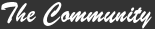
<style>
.page{position:relative;width:155px;height:29px;background:#333333}
.page>*{position:absolute;margin:0}
.t1{font:28.8px "BrushScriptStd";color:#ffffff;scale:0.83 1}
</style>
<div class="page">
<p class="t1" style="left:1px;top:2px;width:151px;height:27px">The Community</p>
</div>
